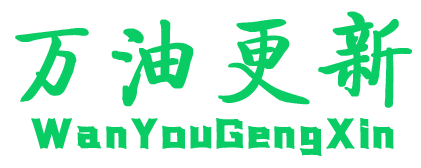
<style>
.page{position:relative;width:421px;height:168px;background:#ffffff}
.page>*{position:absolute;margin:0}
.t1{font:100px "FZQTJW--GB1-0";letter-spacing:0.025em;color:#0acc64;font-weight:bold}
.t2{font:48px "076-SSZhanRenTi";letter-spacing:0.05em;color:#0acc64;font-weight:bold}
</style>
<div class="page">
<p class="t1" style="left:15px;top:11px;width:397px;height:97px">万油更新</p>
<p class="t2" style="left:31px;top:118px;width:363px;height:38px">WanYouGengXin</p>
</div>
